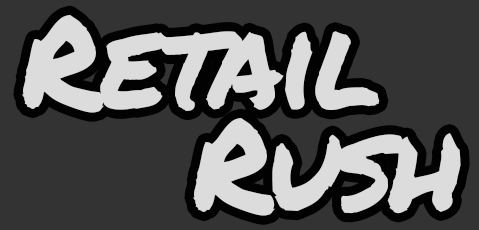
<style>
.page{position:relative;width:479px;height:230px;background:#333333}
.page>*{position:absolute;margin:0}
.t1{font:127.1px/102.8px "PermanentMarker-Regular";letter-spacing:-0.04em;color:#e3e3e3}
</style>
<div class="page">
<p class="t1" style="left:22px;top:14px;width:439px;height:202px;text-align:center;opacity:0.96">Retail<br>      Rush</p>
</div>
